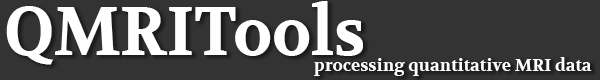
<style>
.page{position:relative;width:600px;height:80px;background:#333333}
.page>*{position:absolute;margin:0}
.t1{font:68.4px "Volkhov-Bold";color:#ffffff;scale:0.95 1}
.t2{font:16.9px "Volkhov-Bold";color:#ffffff}
</style>
<div class="page">
<p class="t1" style="left:6px;top:1px;width:357px;height:64px">QMRITools</p>
<p class="t2" style="left:314px;top:57px;width:278px;height:19px">processing quantitative MRI data</p>
</div>
